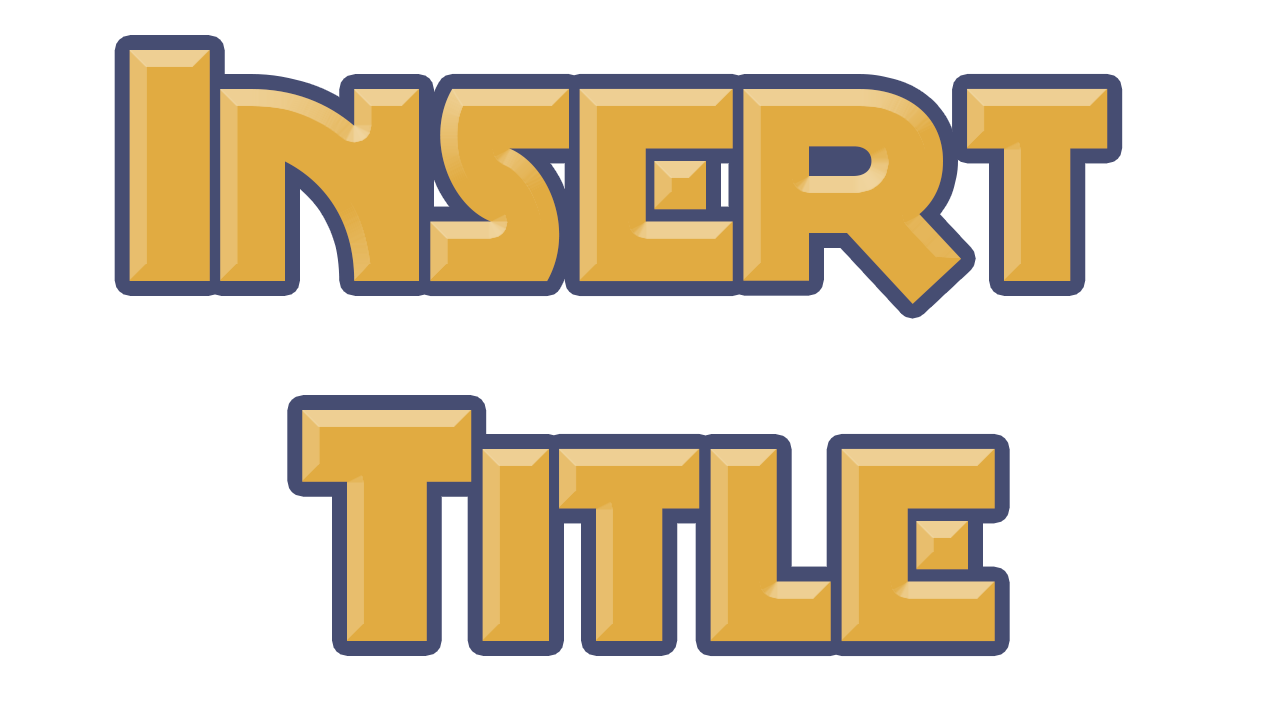
<style>
.page{position:relative;width:1280px;height:720px;background:#ffffff}
.page>*{position:absolute;margin:0}
.t1{font:300px "MinstrelPosterNF";color:#e1ab41}
</style>
<div class="page">
<p class="t1" style="left:129px;top:50px;width:979px;height:592px;text-align:center">Insert <br>Title</p>
</div>
